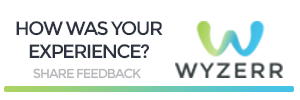
<style>
.page{position:relative;width:300px;height:100px;background:#ffffff}
.page>*{position:absolute;margin:0}
.t1{font:19.3px "Montserrat-Regular";letter-spacing:-0.075em;color:#2c323f}
.t2{font:12.9px "Montserrat-Regular";letter-spacing:-0.075em;color:#b7b8bb}
</style>
<div class="page">
<p class="t1" style="left:16px;top:21px;width:147px;height:38px;text-align:center">HOW WAS YOUR<br>EXPERIENCE?</p>
<p class="t2" style="left:33px;top:68px;width:108px;height:11px">SHARE FEEDBACK</p>
</div>
